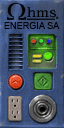
<style>
.page{position:relative;width:64px;height:128px}
.page>*{position:absolute;margin:0}
.t1{font:10px "ArialMT";letter-spacing:0.01em;color:#000000;text-transform:uppercase;scale:0.85 1}
</style>
<div class="page">
<p class="t1" style="left:4px;top:22px;width:56px;height:7px">ENERGIA SA</p>
</div>
